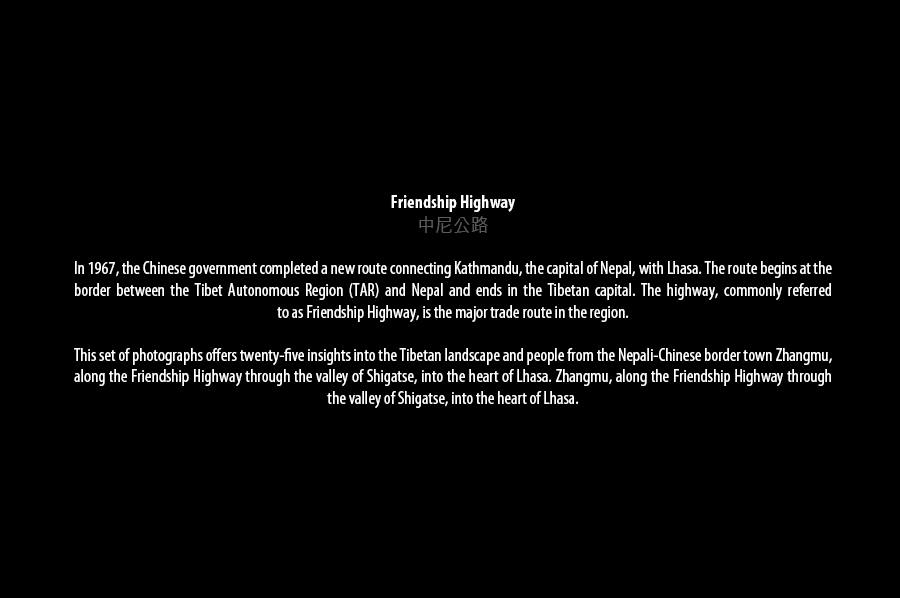
<style>
.page{position:relative;width:900px;height:598px;background:#000000}
.page>*{position:absolute;margin:0}
.t1{font:18px "MyriadPro-Cond";color:#ffffff}
.t2{font:18px "MyriadPro-BoldCond";color:#ffffff}
.t3{font:19px "NanumGothic";color:#5b5b5b}
</style>
<div class="page">
<p class="t1" style="left:74px;top:195px;width:758px;height:213px;text-align:center"><span class="t2">Friendship Highway<br></span><span class="t3">中尼公路<br></span><br>In 1967, the Chinese government completed a new route connecting Kathmandu, the capital of Nepal, with Lhasa. The route begins at the border between the Tibet Autonomous Region (TAR) and Nepal and ends in the Tibetan capital. The highway, commonly referred <br>to as Friendship Highway, is the major trade route in the region.<br><br>This set of photographs offers twenty-five insights into the Tibetan landscape and people from the Nepali-Chinese border town Zhangmu, along the Friendship Highway through the valley of Shigatse, into the heart of Lhasa. Zhangmu, along the Friendship Highway through <br>the valley of Shigatse, into the heart of Lhasa.</p>
</div>
